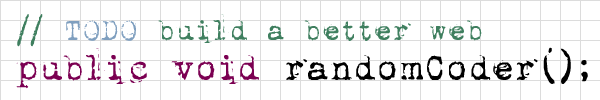
<style>
.page{position:relative;width:600px;height:100px;background:#ffffff}
.page>*{position:absolute;margin:0}
.t1{font:33.3px "1942report";letter-spacing:-0.1em;color:#3f7f5f}
.t2{font:33.3px "1942report";letter-spacing:-0.1em;color:#7f9fbf;font-weight:bold}
.t3{font:41.7px "1942report";letter-spacing:-0.1em;color:#000000}
.t4{font:41.7px "1942report";letter-spacing:-0.1em;color:#7b0052}
</style>
<div class="page">
<p class="t1" style="left:17px;top:14px;width:465px;height:33px">// <span class="t2">TODO</span> build a better web</p>
<p class="t3" style="left:16px;top:47px;width:572px;height:42px"><span class="t4">public void</span> randomCoder();</p>
</div>
